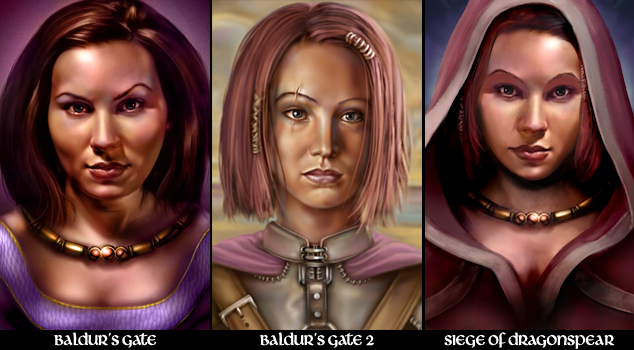
<style>
.page{position:relative;width:634px;height:350px}
.page>*{position:absolute;margin:0}
.t1{font:18px "Livingstone";color:#ffffff}
</style>
<div class="page">
<p class="t1" style="left:54px;top:332px;width:103px;height:16px">Baldur’s Gate</p>
<p class="t1" style="left:260px;top:332px;width:114px;height:16px">Baldur’s Gate 2</p>
<p class="t1" style="left:444px;top:332px;width:171px;height:17px">siege of dragonspear</p>
</div>
